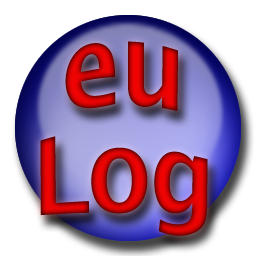
<style>
.page{position:relative;width:256px;height:256px;background:#ffffff}
.page>*{position:absolute;margin:0}
.t1{font:100px/91.7px "LucidaSans-Demi"}
</style>
<div class="page">
<p class="t1" style="left:40px;top:41px;width:168px;height:195px;text-align:center">eu<br>Log</p>
</div>
